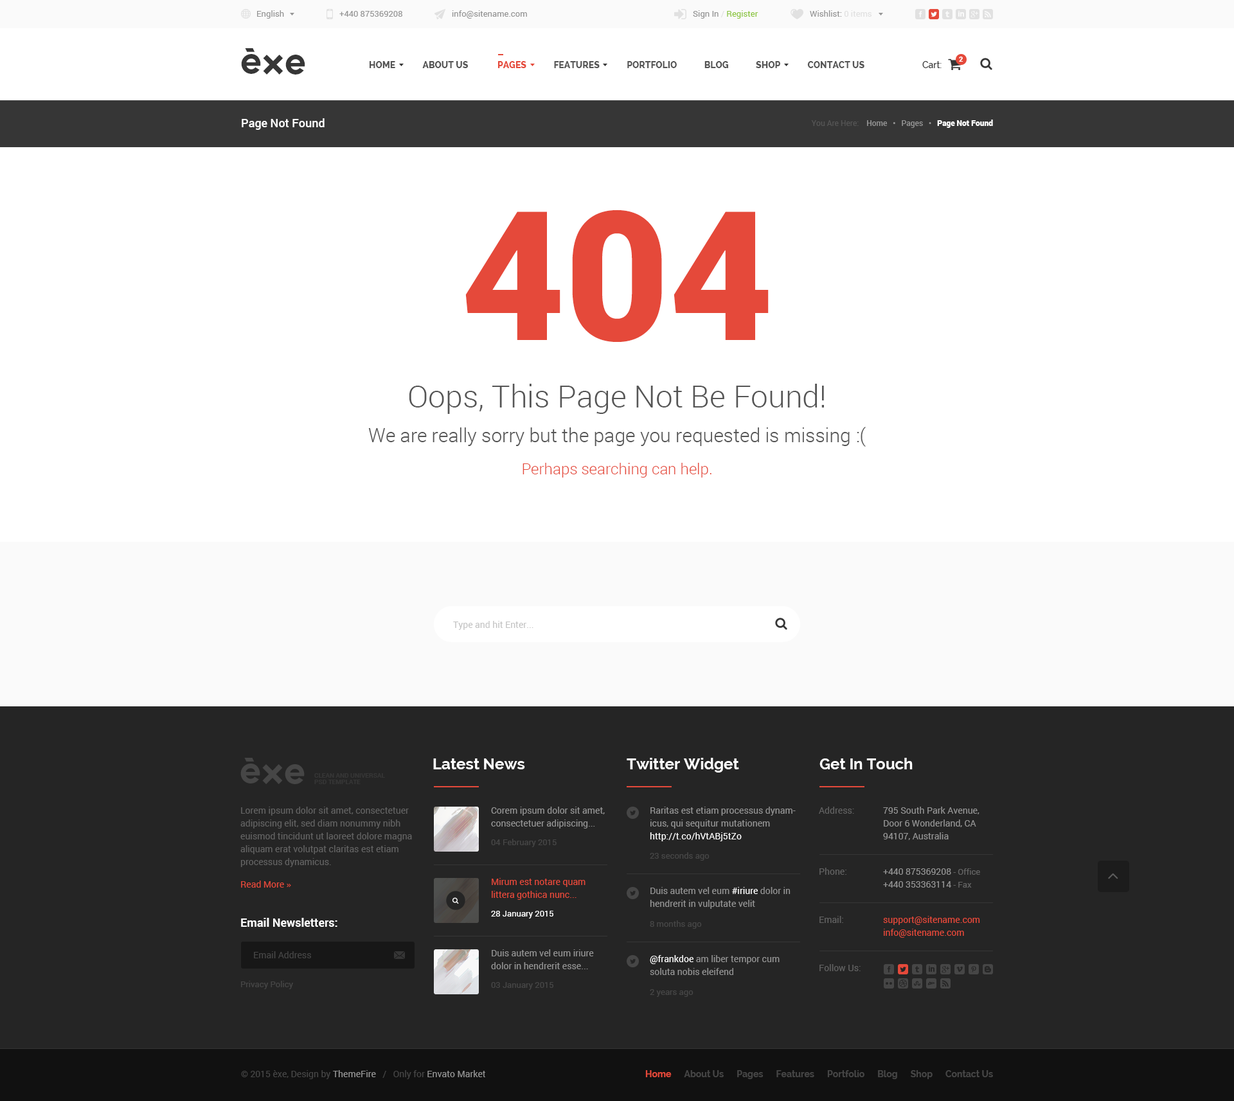
<style>
.page{position:relative;width:1234px;height:1101px;background:#ffffff}
.page>*{position:absolute;margin:0}
.t1{font:8.4px "Roboto-Regular";color:#959595}
.t2{font:8.4px "Roboto-Regular";color:#8dc63f}
.t3{font:8.4px "Roboto-Regular";color:#e1e1e1}
.t4{font:36px "Axis";color:#363636}
.t5{font:9px "Raleway-ExtraBold";color:#555555;text-transform:uppercase}
.t6{font:9px "Raleway-ExtraBold";color:#e5493a;text-transform:uppercase}
.t7{font:9px "Raleway-Medium";color:#363636}
.t8{font:7.1px "Roboto-Black";color:#ffffff}
.t9{font:11.6px "Roboto-Medium";color:#ffffff}
.t10{font:7.7px "Roboto-Medium";color:#959595}
.t11{font:7.7px "Roboto-Regular";color:#555555}
.t12{font:7.7px "Roboto-Black";color:#ffffff}
.t13{font:180px "Roboto-Black";color:#e5493a}
.t14{font:30.9px "Roboto-Light";color:#555555}
.t15{font:19.3px "Roboto-Light";color:#555555}
.t16{font:15.4px "Roboto-Light";color:#e5493a}
.t17{font:9px "Roboto-Regular";color:#c2c2c2}
.t18{font:36px "Axis";color:#464646}
.t19{font:15.4px "Raleway-Bold";color:#ffffff}
.t20{font:6.4px/6.4px "Roboto-Bold";color:#363636;text-transform:uppercase}
.t21{font:9px/12.9px "Roboto-Regular";color:#636363}
.t22{font:9px/12.9px "Roboto-Regular";color:#959595}
.t23{font:9px/12.9px "Roboto-Regular";color:#ffffff}
.t24{font:9px "Roboto-Regular";color:#636363}
.t25{font:8.4px "Roboto-Regular";color:#464646}
.t26{font:8.4px/12.9px "Roboto-Regular";color:#636363}
.t27{font:9px "Roboto-Regular";color:#e5493a}
.t28{font:9px/12.9px "Roboto-Regular";color:#e5493a}
.t29{font:8.4px "Roboto-Regular";color:#ffffff}
.t30{font:11.6px "Roboto-Bold";color:#ffffff}
.t31{font:9px "Roboto-Regular";color:#464646}
.t32{font:9px "Roboto-Regular";color:#959595}
.t33{font:9px "Raleway-Bold";color:#464646}
.t34{font:9px "Raleway-Bold";color:#e5493a}
</style>
<div class="page">
<p class="t1" style="left:257px;top:10px;width:27px;height:9px">English</p>
<p class="t1" style="left:339px;top:11px;width:63px;height:6px">+440 875369208</p>
<p class="t1" style="left:452px;top:10px;width:75px;height:9px">info@sitename.com</p>
<p class="t2" style="left:693px;top:10px;width:66px;height:9px"><span class="t1">Sign In </span><span class="t3">/ </span>Register</p>
<p class="t1" style="left:810px;top:10px;width:62px;height:7px">Wishlist: <span class="t3">0 items</span></p>
<p class="t4" style="left:241px;top:48px;width:64px;height:27px">èxe</p>
<p class="t5" style="left:370px;top:61px;width:495px;height:7px">Home             About Us              <span class="t6">Pages</span>             Features             Portfolio             Blog             Shop             Contact Us</p>
<p class="t7" style="left:923px;top:61px;width:19px;height:7px">Cart:</p>
<p class="t8" style="left:959px;top:57px;width:5px;height:5px">2</p>
<p class="t9" style="left:242px;top:118px;width:83px;height:12px">Page Not Found</p>
<p class="t10" style="left:811px;top:120px;width:182px;height:8px"><span class="t11">You Are Here:    </span>Home   •   Pages   •   <span class="t12">Page Not Found</span></p>
<p class="t13" style="left:465px;top:210px;width:304px;height:132px">404</p>
<p class="t14" style="left:409px;top:384px;width:415px;height:30px">Oops, This Page Not Be Found!</p>
<p class="t15" style="left:368px;top:427px;width:498px;height:20px">We are really sorry but the page you requested is missing :(</p>
<p class="t16" style="left:523px;top:463px;width:189px;height:15px">Perhaps searching can help.</p>
<p class="t17" style="left:453px;top:621px;width:81px;height:9px">Type and hit Enter...</p>
<p class="t18" style="left:240px;top:758px;width:65px;height:26px">èxe</p>
<p class="t19" style="left:433px;top:759px;width:92px;height:11px">Latest News</p>
<p class="t19" style="left:627px;top:758px;width:112px;height:15px">Twitter Widget</p>
<p class="t19" style="left:820px;top:758px;width:93px;height:12px">Get In Touch</p>
<p class="t20" style="left:314px;top:773px;width:71px;height:11px">Clean and Universal<br>PSD Template</p>
<p class="t21" style="left:240px;top:807px;width:172px;height:60px">Lorem ipsum dolor sit amet, consectetuer adipiscing elit, sed diam nonummy nibh euismod tincidunt ut laoreet dolore magna aliquam erat volutpat claritas est etiam processus dynamicus.</p>
<p class="t22" style="left:491px;top:807px;width:114px;height:22px">Corem ipsum dolor sit amet, consectetuer adipiscing...</p>
<p class="t22" style="left:650px;top:807px;width:146px;height:35px">Raritas est etiam processus dynamicus, qui sequitur mutationem <span class="t23">http://t.co/hVtABj5tZo</span></p>
<p class="t24" style="left:819px;top:807px;width:35px;height:7px">Address:</p>
<p class="t22" style="left:883px;top:807px;width:97px;height:33px">795 South Park Avenue, Door 6 Wonderland, CA 94107, Australia</p>
<p class="t25" style="left:491px;top:839px;width:66px;height:8px">04 February 2015</p>
<p class="t25" style="left:650px;top:852px;width:60px;height:9px">23 seconds ago</p>
<p class="t24" style="left:820px;top:868px;width:27px;height:7px">Phone:</p>
<p class="t22" style="left:883px;top:869px;width:97px;height:19px">+440 875369208 <span class="t26">- Office<br></span>+440 353363114 <span class="t26">- Fax</span></p>
<p class="t27" style="left:241px;top:881px;width:50px;height:7px">Read More »</p>
<p class="t28" style="left:492px;top:878px;width:94px;height:22px">Mirum est notare quam littera gothica nunc...</p>
<p class="t22" style="left:650px;top:887px;width:141px;height:22px">Duis autem vel eum <span class="t23">#iriure</span> dolor in hendrerit in vulputate velit</p>
<p class="t29" style="left:491px;top:911px;width:63px;height:8px">28 January 2015</p>
<p class="t24" style="left:820px;top:916px;width:23px;height:7px">Email:</p>
<p class="t28" style="left:883px;top:916px;width:97px;height:22px">support@sitename.com<br>info@sitename.com</p>
<p class="t30" style="left:241px;top:918px;width:97px;height:9px">Email Newsletters:</p>
<p class="t25" style="left:650px;top:921px;width:52px;height:8px">8 months ago</p>
<p class="t31" style="left:254px;top:951px;width:57px;height:8px">Email Address</p>
<p class="t22" style="left:491px;top:950px;width:103px;height:19px">Duis autem vel eum iriure dolor in hendrerit esse...</p>
<p class="t22" style="left:650px;top:955px;width:130px;height:20px"><span class="t23">@frankdoe</span> am liber tempor cum soluta nobis eleifend</p>
<p class="t24" style="left:820px;top:964px;width:41px;height:7px">Follow Us:</p>
<p class="t25" style="left:241px;top:981px;width:52px;height:8px">Privacy Policy</p>
<p class="t25" style="left:491px;top:982px;width:63px;height:8px">03 January 2015</p>
<p class="t25" style="left:650px;top:989px;width:44px;height:8px">2 years ago</p>
<p class="t31" style="left:241px;top:1070px;width:244px;height:9px">© 2015 èxe, Design by <span class="t32">ThemeFire</span>   /   Only for <span class="t32">Envato Market</span></p>
<p class="t33" style="left:645px;top:1070px;width:348px;height:9px"><span class="t34">Home</span>      About Us      Pages      Features      Portfolio      Blog      Shop      Contact Us</p>
</div>
